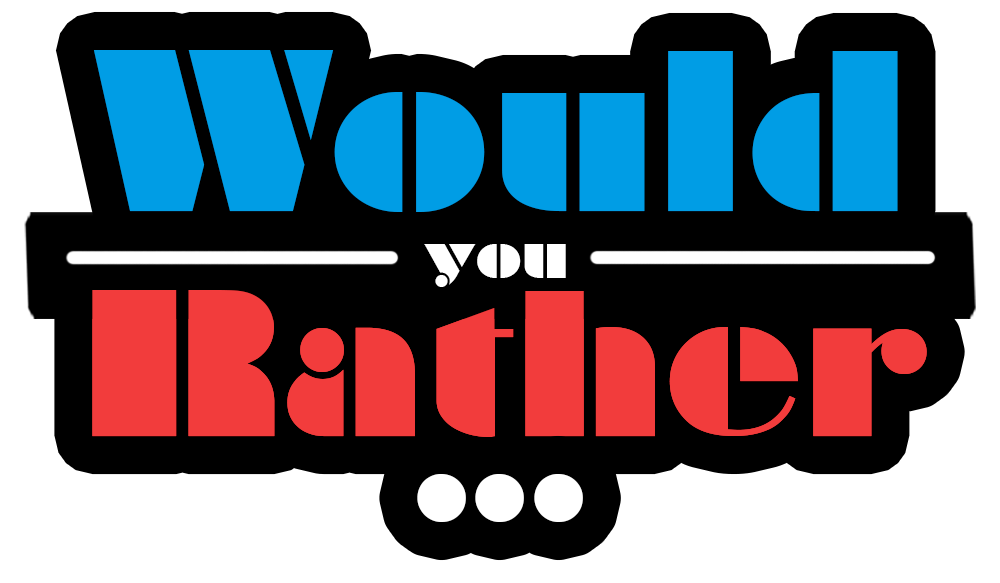
<style>
.page{position:relative;width:1000px;height:583px;background:#000000}
.page>*{position:absolute;margin:0}
.t1{font:209.1px "Braggadocio";color:#009de5}
.t2{font:60.2px "Braggadocio";color:#ffffff}
.t3{font:190.3px "Braggadocio";color:#f23c3c}
.t4{font:200px "Braggadocio";color:#ffffff}
</style>
<div class="page">
<p class="t1" style="left:93px;top:50px;width:805px;height:162px">Would</p>
<p class="t2" style="left:424px;top:244px;width:142px;height:43px">you</p>
<p class="t3" style="left:92px;top:290px;width:835px;height:147px">Rather</p>
<p class="t3" style="left:92px;top:290px;width:835px;height:147px">Rather</p>
<p class="t4" style="left:417px;top:474px;width:166px;height:48px">...</p>
</div>
